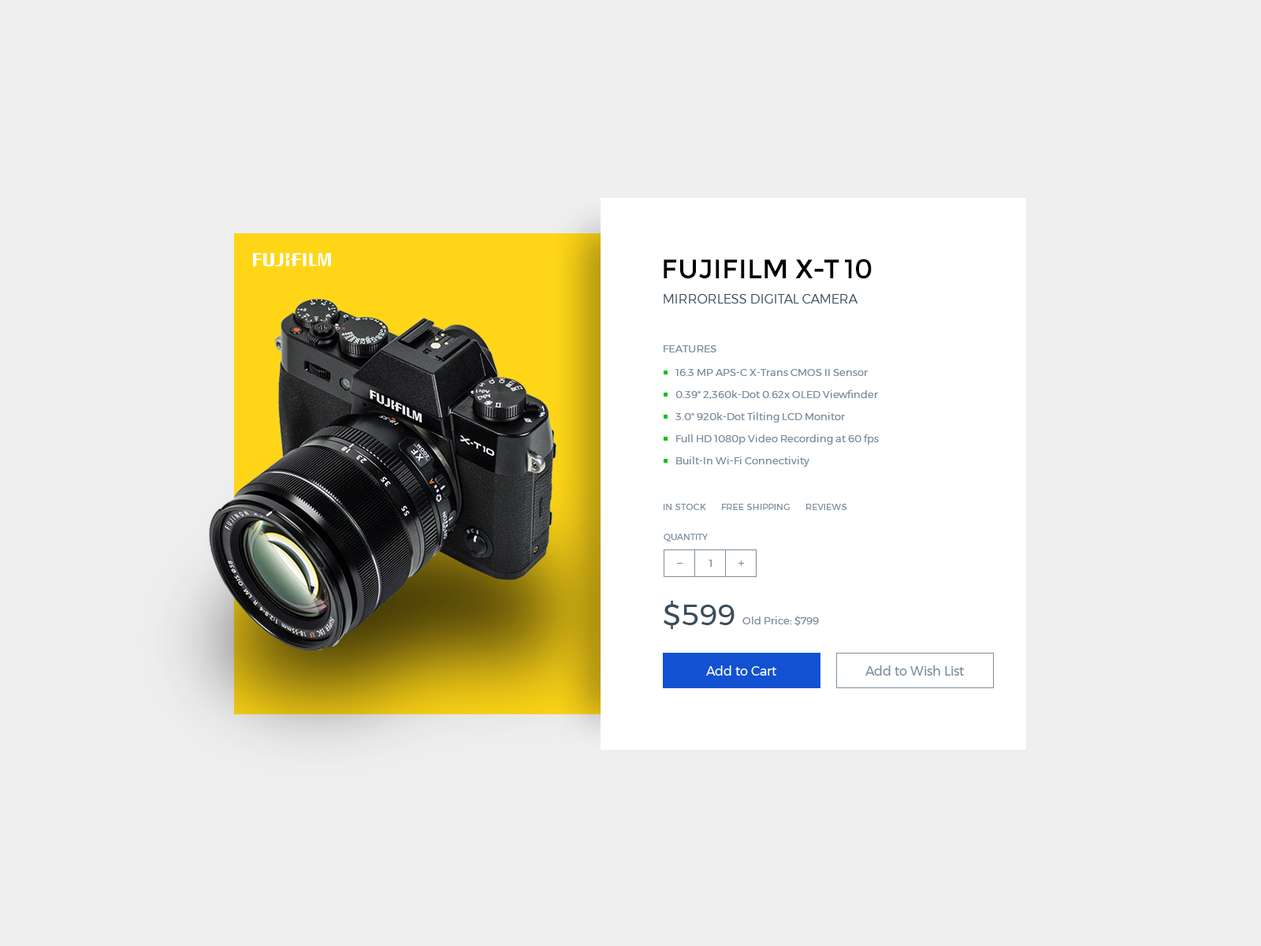
<style>
.page{position:relative;width:1261px;height:946px;background:#efefef}
.page>*{position:absolute;margin:0}
.t1{font:26.8px "Montserrat-Regular";color:#000000;text-transform:uppercase}
.t2{font:12.6px "Montserrat-Light";color:#3a4d5c;text-transform:uppercase}
.t3{font:10.2px "Montserrat-Regular";letter-spacing:0.025em;color:#7c8d9c;text-transform:uppercase}
.t4{font:10.2px/22.1px "Montserrat-Regular";color:#7c8d9c}
.t5{font:8.7px "Montserrat-Regular";letter-spacing:0.025em;color:#7c8d9c;text-transform:uppercase}
.t6{font:8.7px "Montserrat-Regular";color:#7c8d9c;text-transform:uppercase}
.t7{font:10.2px "Montserrat-Regular";color:#7c8d9c}
.t8{font:29.2px "Montserrat-Regular";color:#3a4d5c}
.t9{font:12.6px "Montserrat-Regular";color:#ffffff}
.t10{font:12.6px "Montserrat-Regular";color:#7c8d9c}
</style>
<div class="page">
<p class="t1" style="left:664px;top:258px;width:208px;height:21px">Fujifilm X-T10</p>
<p class="t2" style="left:664px;top:294px;width:194px;height:9px">Mirrorless Digital Camera</p>
<p class="t3" style="left:664px;top:345px;width:52px;height:7px">Features</p>
<p class="t4" style="left:675px;top:369px;width:204px;height:98px">16.3 MP APS-C X-Trans CMOS II Sensor<br>0.39" 2,360k-Dot 0.62x OLED Viewfinder<br>3.0" 920k-Dot Tilting LCD Monitor<br>Full HD 1080p Video Recording at 60 fps<br>Built-In Wi-Fi Connectivity</p>
<p class="t5" style="left:664px;top:504px;width:42px;height:6px">In Stock</p>
<p class="t5" style="left:722px;top:504px;width:68px;height:6px">Free Shipping</p>
<p class="t5" style="left:806px;top:504px;width:41px;height:6px">Reviews</p>
<p class="t6" style="left:664px;top:534px;width:44px;height:7px">Quantity</p>
<p class="t7" style="left:708px;top:560px;width:4px;height:7px">1</p>
<p class="t8" style="left:664px;top:601px;width:70px;height:28px">$599</p>
<p class="t7" style="left:742px;top:615px;width:77px;height:11px">Old Price: $799</p>
<p class="t9" style="left:706px;top:665px;width:70px;height:10px">Add to Cart</p>
<p class="t10" style="left:865px;top:665px;width:99px;height:10px">Add to Wish List</p>
</div>
